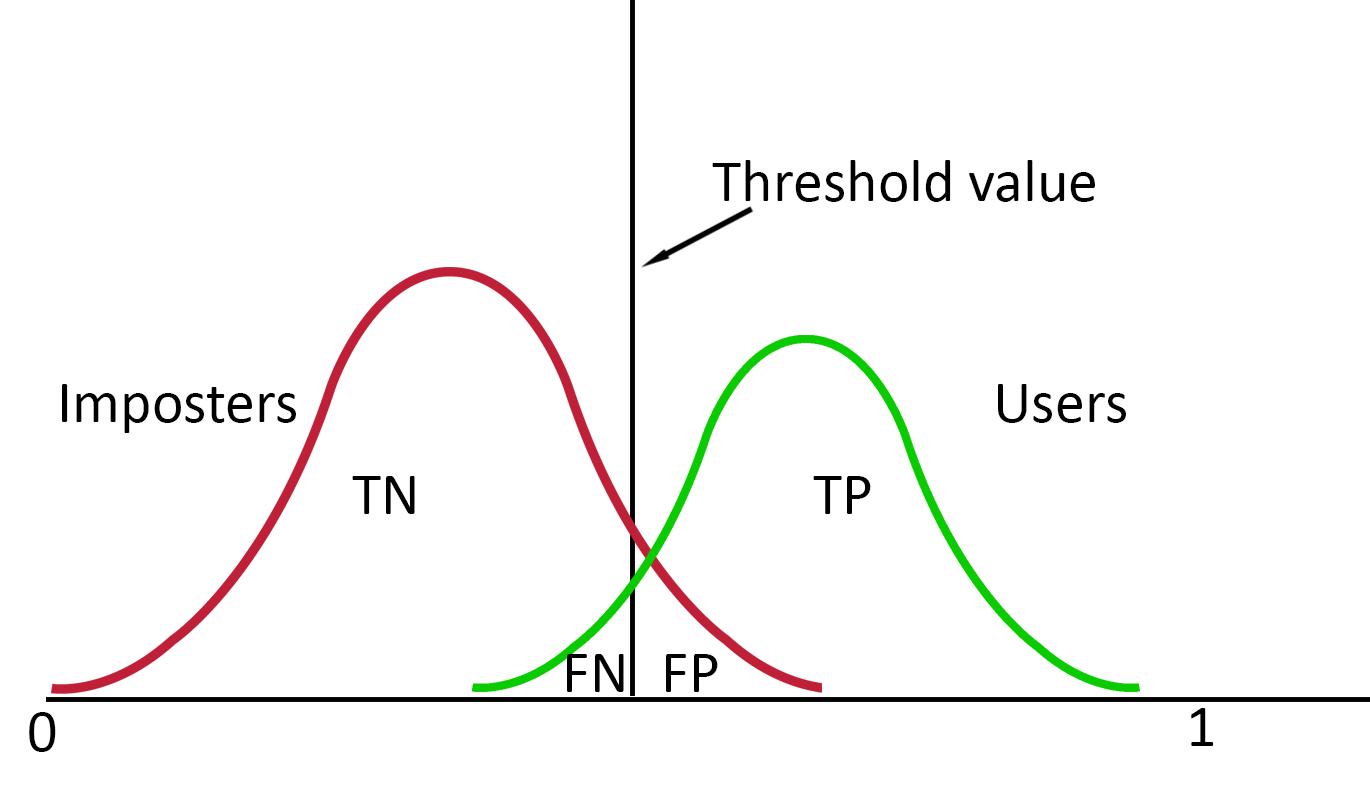
<style>
.page{position:relative;width:1370px;height:812px;background:#ffffff}
.page>*{position:absolute;margin:0}
.t1{font:60px "Calibri";color:#000000}
</style>
<div class="page">
<p class="t1" style="left:712px;top:160px;width:383px;height:42px">Threshold value</p>
<p class="t1" style="left:62px;top:384px;width:234px;height:49px">Imposters</p>
<p class="t1" style="left:998px;top:384px;width:128px;height:39px">Users</p>
<p class="t1" style="left:352px;top:476px;width:63px;height:38px">TN</p>
<p class="t1" style="left:813px;top:476px;width:58px;height:38px">TP</p>
<p class="t1" style="left:567px;top:654px;width:57px;height:38px">FN</p>
<p class="t1" style="left:666px;top:654px;width:52px;height:38px">FP</p>
<p class="t1" style="left:29px;top:712px;width:27px;height:40px">0</p>
<p class="t1" style="left:1191px;top:708px;width:23px;height:38px">1</p>
</div>
